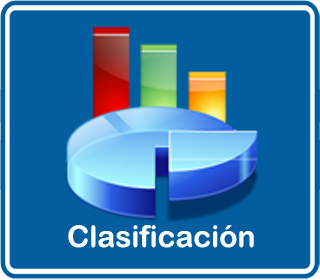
<style>
.page{position:relative;width:320px;height:280px;background:#035e9f}
.page>*{position:absolute;margin:0}
.t1{font:30px "ArialRoundedMTBold";color:#ffffff}
</style>
<div class="page">
<p class="t1" style="left:68px;top:225px;width:186px;height:23px">Clasificación</p>
</div>
